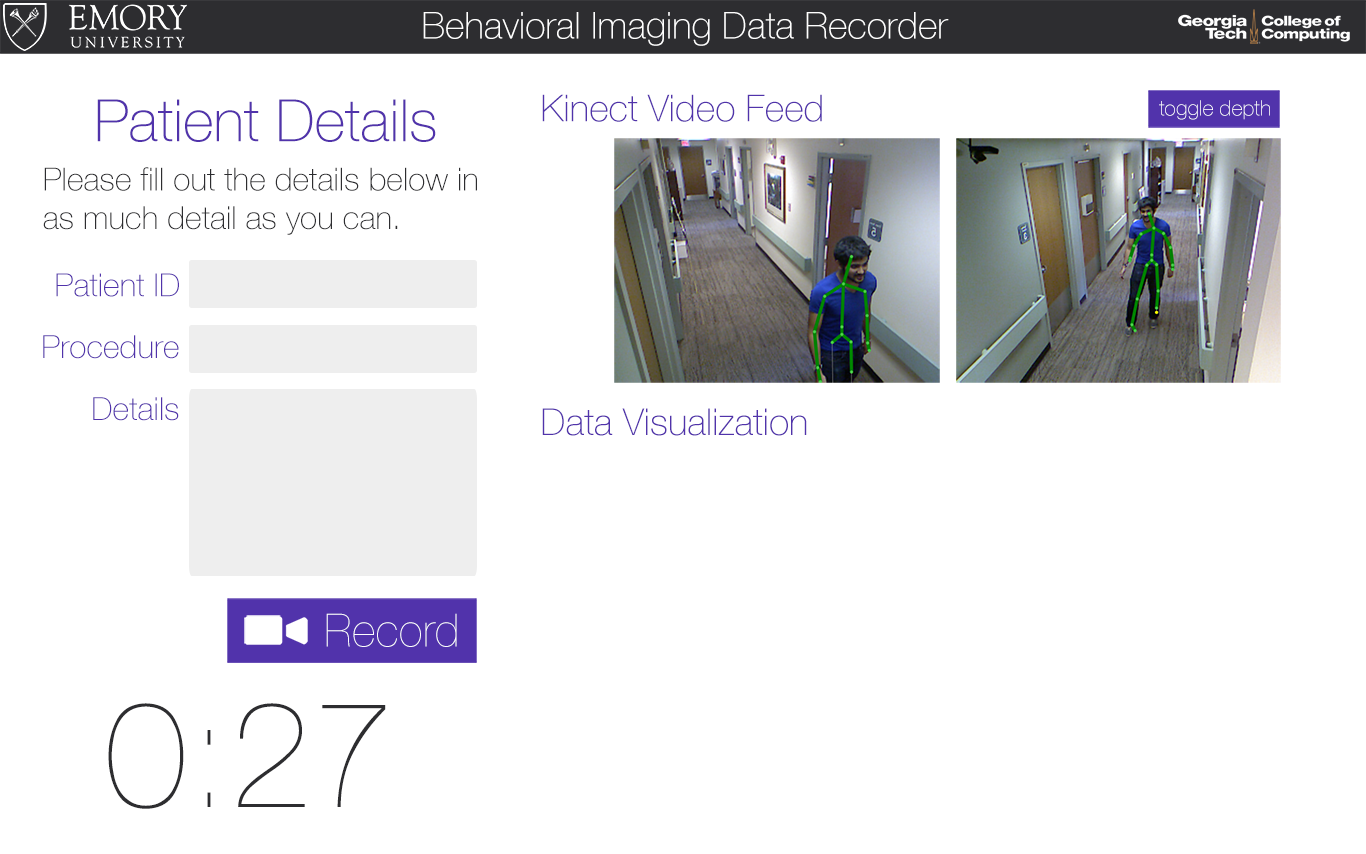
<style>
.page{position:relative;width:1366px;height:854px;background:#ffffff}
.page>*{position:absolute;margin:0}
.t1{font:37.4px "HelveNueThin";color:#ffffff}
.t2{font:58.7px "HelveNueThin";color:#5133ab}
.t3{font:37.4px "HelveNueThin";color:#5133ab}
.t4{font:21.3px "HelveNueThin";color:#ffffff}
.t5{font:32px "HelveNueThin";color:#2d2d30}
.t6{font:32px "HelveNueThin";color:#5133ab}
.t7{font:45.9px "HelveticaNeue-UltraLight";color:#ffffff}
.t8{font:149.4px "HelveticaNeue-UltraLight";color:#2d2d30}
</style>
<div class="page">
<p class="t1" style="left:423px;top:12px;width:526px;height:34px">Behavioral Imaging Data Recorder</p>
<p class="t2" style="left:97px;top:99px;width:339px;height:43px">Patient Details</p>
<p class="t3" style="left:542px;top:94px;width:280px;height:28px">Kinect Video Feed</p>
<p class="t4" style="left:1159px;top:100px;width:111px;height:20px">toggle depth</p>
<p class="t5" style="left:43px;top:167px;width:434px;height:68px">Please fill out the details below in as much detail as you can.</p>
<p class="t6" style="left:56px;top:273px;width:123px;height:24px">Patient ID</p>
<p class="t6" style="left:43px;top:335px;width:136px;height:24px">Procedure</p>
<p class="t6" style="left:93px;top:397px;width:86px;height:24px">Details</p>
<p class="t3" style="left:542px;top:408px;width:265px;height:28px">Data Visualization</p>
<p class="t7" style="left:326px;top:613px;width:131px;height:34px">Record</p>
<p class="t8" style="left:108px;top:703px;width:278px;height:106px">0:27</p>
</div>
